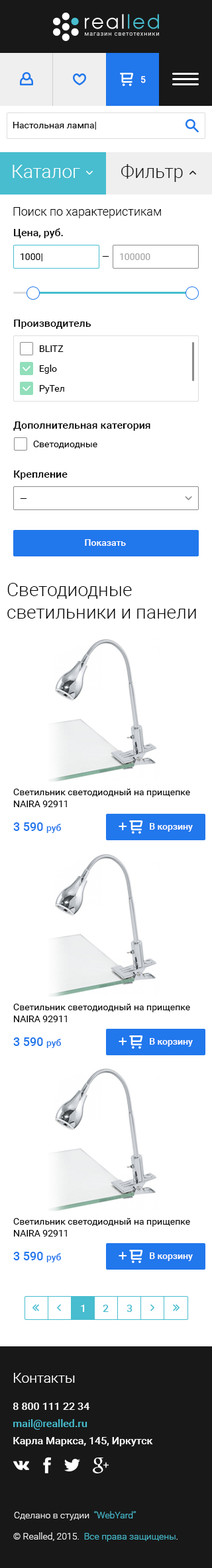
<style>
.page{position:relative;width:212px;height:1568px;background:#ffffff}
.page>*{position:absolute;margin:0}
.t1{font:9.3px "Roboto-Medium";color:#ffffff}
.t2{font:9.3px "Roboto-Regular";color:#000000}
.t3{font:18.5px "Roboto-Light";color:#ffffff}
.t4{font:18.5px "Roboto-Light";color:#181818}
.t5{font:11.9px "Roboto-Light";color:#000000}
.t6{font:10.6px "Roboto-Medium";color:#000000}
.t7{font:9.3px "Roboto-Regular";color:#a3a3a3}
.t8{font:18.5px/22.5px "Roboto-Light";color:#000000}
.t9{font:9.3px/11.9px "Roboto-Regular";color:#010101}
.t10{font:11.9px "Roboto-Medium";color:#2177ec}
.t11{font:9.3px "Roboto-Medium";color:#2177ec}
.t12{font:10.6px "Roboto-Medium";color:#ffffff}
.t13{font:10.6px "Roboto-Medium";color:#47bdcf}
.t14{font:13.9px "Roboto-Light";color:#ffffff}
.t15{font:10.6px/17.2px "Roboto-Medium";color:#ffffff}
.t16{font:10.6px/17.2px "Roboto-Medium";color:#47bdcf}
.t17{font:9.3px "Roboto-Light";color:#efefef}
.t18{font:9.3px "Roboto-Light";color:#47bdcf}
</style>
<div class="page">
<p class="t1" style="left:141px;top:76px;width:5px;height:7px">5</p>
<p class="t2" style="left:13px;top:122px;width:83px;height:8px">Настольная лампа|</p>
<p class="t3" style="left:13px;top:165px;width:67px;height:13px">Каталог</p>
<p class="t4" style="left:121px;top:164px;width:62px;height:18px">Фильтр</p>
<p class="t5" style="left:13px;top:207px;width:148px;height:11px">Поиск по характеристикам</p>
<p class="t6" style="left:14px;top:228px;width:49px;height:10px">Цена, руб.</p>
<p class="t2" style="left:21px;top:253px;width:21px;height:8px">1000|</p>
<p class="t2" style="left:102px;top:256px;width:7px;height:1px">—</p>
<p class="t7" style="left:120px;top:253px;width:30px;height:7px">100000</p>
<p class="t6" style="left:14px;top:320px;width:77px;height:9px">Производитель</p>
<p class="t2" style="left:40px;top:345px;width:24px;height:7px">BLITZ</p>
<p class="t2" style="left:40px;top:365px;width:17px;height:9px">Eglo</p>
<p class="t2" style="left:40px;top:385px;width:24px;height:9px">РуТел</p>
<p class="t6" style="left:13px;top:421px;width:137px;height:10px">Дополнительная категория</p>
<p class="t2" style="left:33px;top:441px;width:64px;height:8px">Светодиодные</p>
<p class="t6" style="left:14px;top:470px;width:53px;height:10px">Крепление</p>
<p class="t2" style="left:20px;top:498px;width:7px;height:1px">—</p>
<p class="t1" style="left:85px;top:539px;width:41px;height:7px">Показать</p>
<p class="t8" style="left:7px;top:583px;width:189px;height:36px">Светодиодные светильники и панели</p>
<p class="t9" style="left:13px;top:789px;width:177px;height:18px">Светильник светодиодный на прищепке NAIRA 92911</p>
<p class="t10" style="left:13px;top:822px;width:48px;height:11px">3 590 <span class="t11">руб</span></p>
<p class="t1" style="left:150px;top:823px;width:43px;height:9px">В корзину</p>
<p class="t9" style="left:13px;top:1004px;width:177px;height:18px">Светильник светодиодный на прищепке NAIRA 92911</p>
<p class="t10" style="left:13px;top:1037px;width:48px;height:11px">3 590 <span class="t11">руб</span></p>
<p class="t1" style="left:150px;top:1038px;width:43px;height:9px">В корзину</p>
<p class="t9" style="left:13px;top:1218px;width:177px;height:19px">Светильник светодиодный на прищепке NAIRA 92911</p>
<p class="t10" style="left:13px;top:1252px;width:48px;height:10px">3 590 <span class="t11">руб</span></p>
<p class="t1" style="left:150px;top:1252px;width:43px;height:9px">В корзину</p>
<p class="t12" style="left:81px;top:1305px;width:4px;height:7px">1</p>
<p class="t13" style="left:103px;top:1305px;width:6px;height:7px">2</p>
<p class="t13" style="left:126px;top:1305px;width:6px;height:7px">3</p>
<p class="t14" style="left:14px;top:1373px;width:61px;height:10px">Контакты</p>
<p class="t15" style="left:13px;top:1403px;width:140px;height:43px">8 800 111 22 34 <br><span class="t16">mail@realled.ru<br></span>Карла Маркса, 145, Иркутск</p>
<p class="t17" style="left:14px;top:1511px;width:122px;height:9px">Сделано в студии  <span class="t18">“WebYard”</span></p>
<p class="t18" style="left:13px;top:1532px;width:164px;height:10px"><span class="t17">© Realled, 2015.  </span>Все права защищены<span class="t17">.</span></p>
</div>
